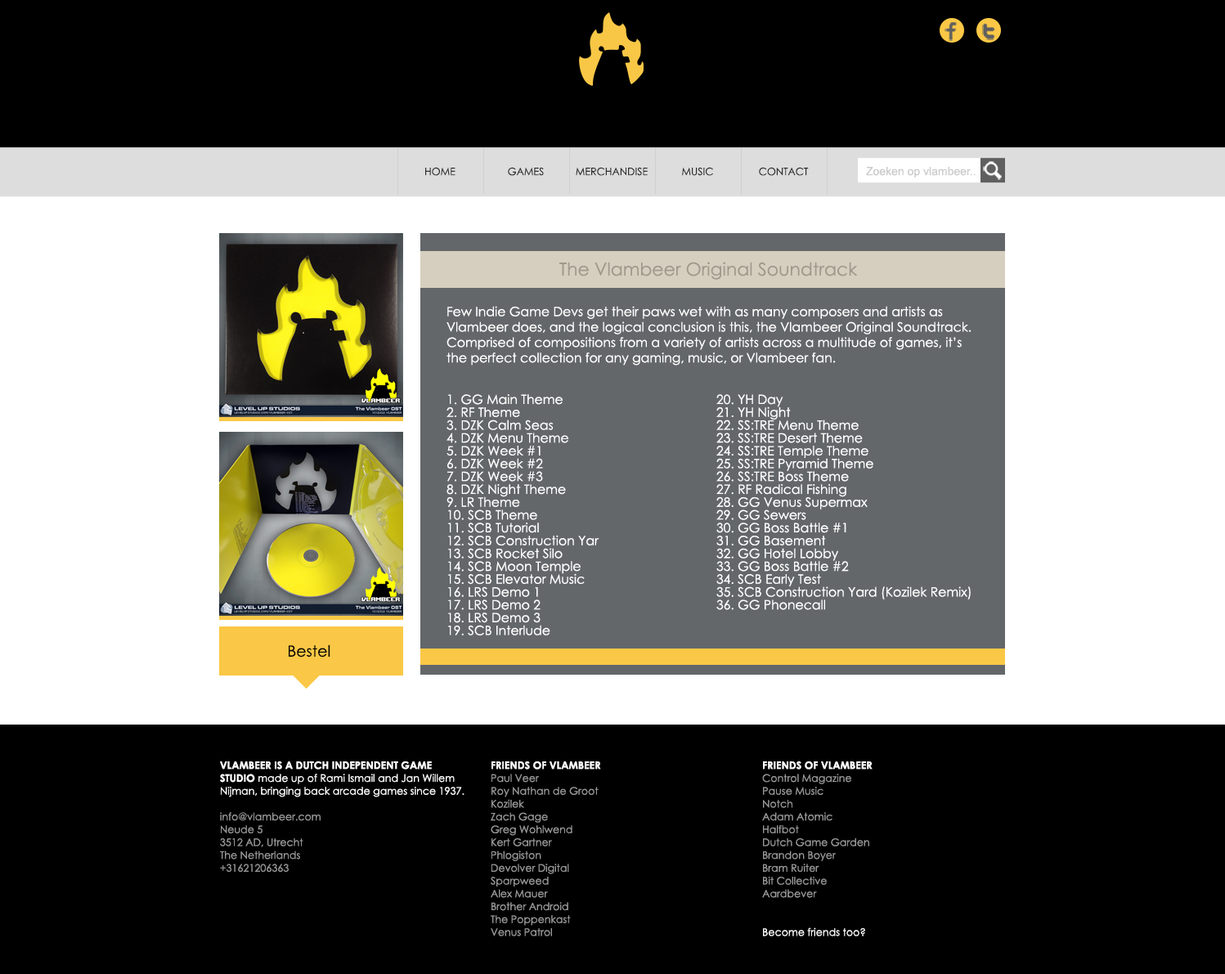
<style>
.page{position:relative;width:1225px;height:974px;background:#000000}
.page>*{position:absolute;margin:0}
.t1{font:10.3px "CenturyGothic";color:#2c2c2c}
.t2{font:11.5px "ArialMT";color:#cccccc}
.t3{font:18px "CenturyGothic";color:#9f998d}
.t4{font:12.8px/15.4px "CenturyGothic";color:#ffffff}
.t5{font:12.8px/12.8px "CenturyGothic";color:#ffffff}
.t6{font:15.4px "CenturyGothic";color:#000000}
.t7{font:10.3px/12.8px "CenturyGothic";color:#ffffff}
.t8{font:10.3px/12.8px "CenturyGothic-Bold";color:#ffffff}
.t9{font:10.3px/12.8px "CenturyGothic";color:#999999}
</style>
<div class="page">
<p class="t1" style="left:425px;top:167px;width:30px;height:9px">HOME</p>
<p class="t1" style="left:508px;top:167px;width:36px;height:9px">GAMES</p>
<p class="t1" style="left:576px;top:167px;width:71px;height:9px">MERCHANDISE</p>
<p class="t1" style="left:682px;top:167px;width:31px;height:9px">MUSIC</p>
<p class="t1" style="left:759px;top:167px;width:50px;height:9px">CONTACT</p>
<p class="t2" style="left:866px;top:167px;width:109px;height:10px">Zoeken op vlambeer..</p>
<p class="t3" style="left:559px;top:262px;width:299px;height:18px">The Vlambeer Original Soundtrack</p>
<p class="t4" style="left:446px;top:306px;width:525px;height:59px">Few Indie Game Devs get their paws wet with as many composers and artists as Vlambeer does, and the logical conclusion is this, the Vlambeer Original Soundtrack. Comprised of compositions from a variety of artists across a multitude of games, it’s the perfect collection for any gaming, music, or Vlambeer fan.</p>
<p class="t5" style="left:446px;top:394px;width:153px;height:241px">1. GG Main Theme<br>2. RF Theme<br>3. DZK Calm Seas<br>4. DZK Menu Theme<br>5. DZK Week #1<br>6. DZK Week #2<br>7. DZK Week #3<br>8. DZK Night Theme<br>9. LR Theme<br>10. SCB Theme<br>11. SCB Tutorial<br>12. SCB Construction Yar<br>13. SCB Rocket Silo<br>14. SCB Moon Temple<br>15. SCB Elevator Music<br>16. LRS Demo 1<br>17. LRS Demo 2<br>18. LRS Demo 3<br>19. SCB Interlude</p>
<p class="t5" style="left:716px;top:394px;width:254px;height:216px">20. YH Day<br>21. YH Night<br>22. SS:TRE Menu Theme<br>23. SS:TRE Desert Theme<br>24. SS:TRE Temple Theme<br>25. SS:TRE Pyramid Theme<br>26. SS:TRE Boss Theme<br>27. RF Radical Fishing<br>28. GG Venus Supermax<br>29. GG Sewers<br>30. GG Boss Battle #1<br>31. GG Basement<br>32. GG Hotel Lobby<br>33. GG Boss Battle #2<br>34. SCB Early Test<br>35. SCB Construction Yard (Kozilek Remix)<br>36. GG Phonecall</p>
<p class="t6" style="left:289px;top:644px;width:41px;height:13px">Bestel</p>
<p class="t7" style="left:220px;top:761px;width:244px;height:111px"><span class="t8">VLAMBEER IS A DUTCH INDEPENDENT GAME STUDIO</span> made up of Rami Ismail and Jan Willem Nijman, bringing back arcade games since 1937.<br><br><span class="t9">info@vlambeer.com <br>Neude 5<br>3512 AD, Utrecht<br>The Netherlands<br>+31621206363</span></p>
<p class="t9" style="left:491px;top:761px;width:110px;height:175px"><span class="t8">FRIENDS OF VLAMBEER<br></span>Paul Veer<br>Roy Nathan de Groot<br>Kozilek<br>Zach Gage<br>Greg Wohlwend<br>Kert Gartner<br>Phlogiston<br>Devolver Digital<br>Sparpweed<br>Alex Mauer<br>Brother Android<br>The Poppenkast<br>Venus Patrol</p>
<p class="t9" style="left:762px;top:761px;width:110px;height:175px"><span class="t8">FRIENDS OF VLAMBEER<br></span>Control Magazine<br>Pause Music<br>Notch<br>Adam Atomic<br>Halfbot<br>Dutch Game Garden<br>Brandon Boyer<br>Bram Ruiter<br>Bit Collective<br>Aardbever<br><br><br><span class="t7">Become friends too?</span></p>
</div>
